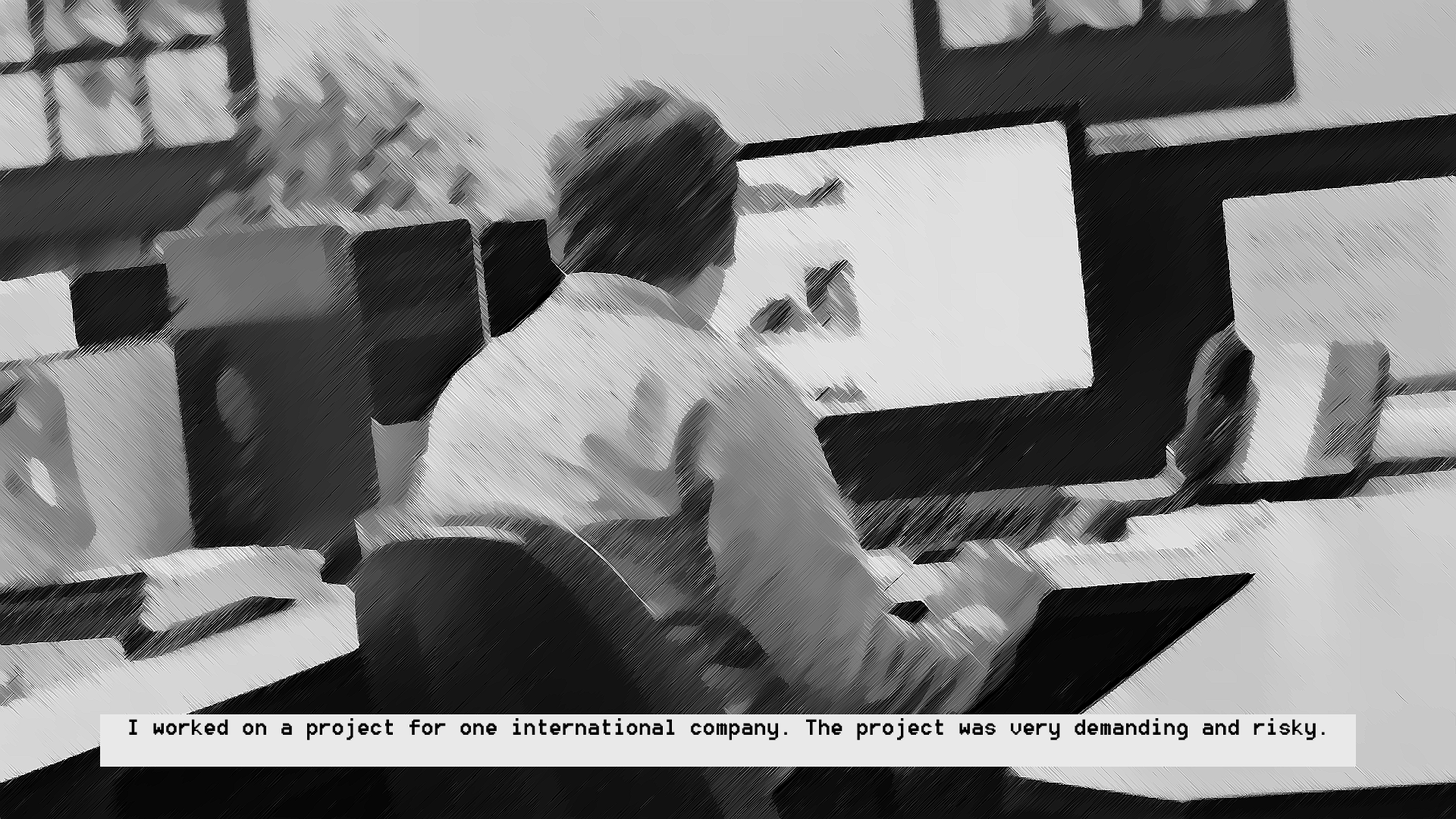
<style>
.page{position:relative;width:1456px;height:819px}
.page>*{position:absolute;margin:0}
.t1{font:27.3px "8514oem";color:#000000}
</style>
<div class="page">
<p class="t1" style="left:129px;top:718px;width:1196px;height:22px">I worked on a project for one international company. The project was very demanding and risky.</p>
</div>
